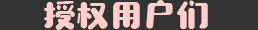
<style>
.page{position:relative;width:258px;height:30px;background:#333333}
.page>*{position:absolute;margin:0}
.t1{font:33.3px "MF-SuBai(Noncommercial)-Regular";color:#ffcdca}
</style>
<div class="page">
<p class="t1" style="left:44px;top:0px;width:164px;height:30px">授权用户们</p>
</div>
